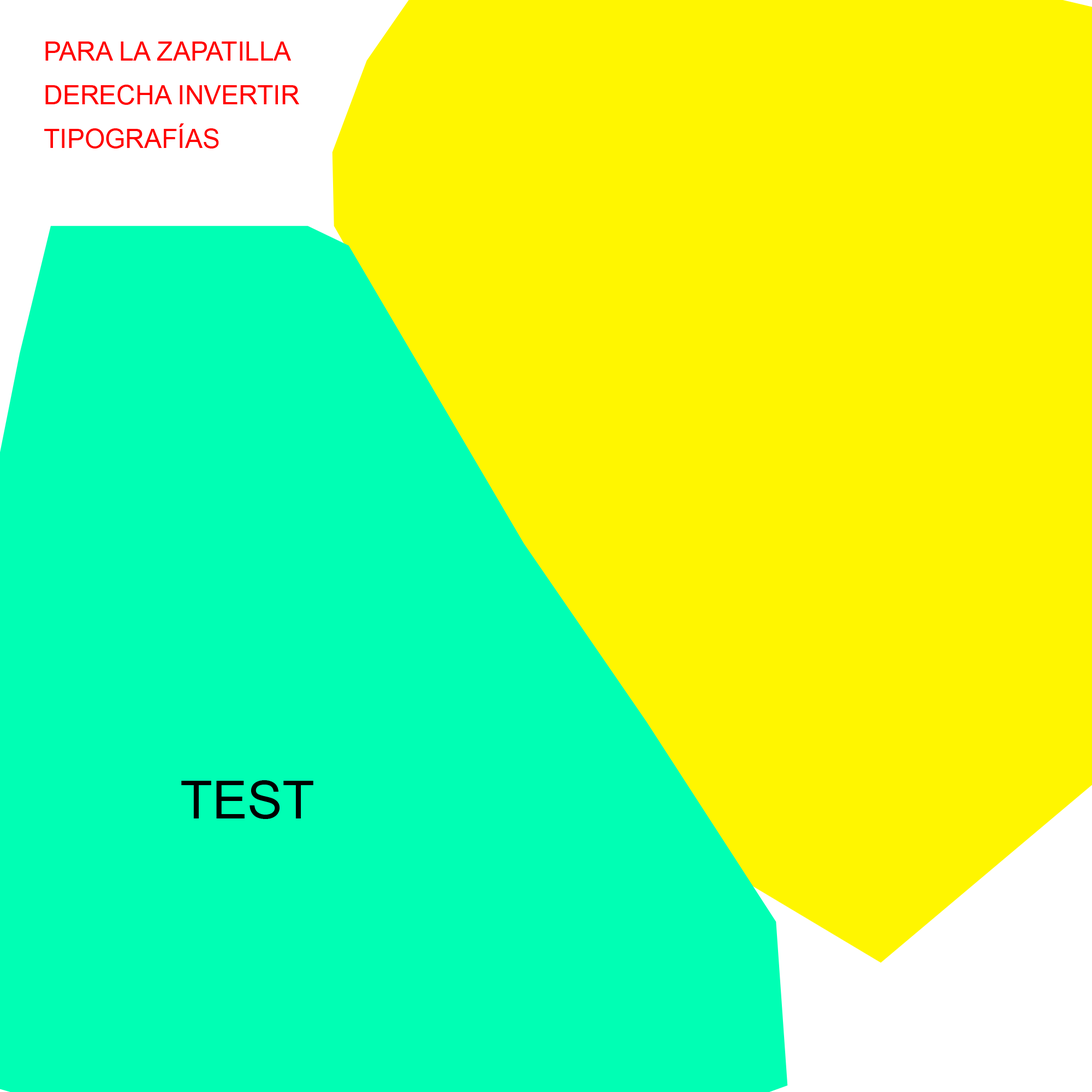
<style>
.page{position:relative;width:1092px;height:1092px;background:#fff600}
.page>*{position:absolute;margin:0}
.t1{font:26.2px/43.8px "ArialMT";color:#ff0000}
.t2{font:52.4px "ArialMT";color:#000000}
</style>
<div class="page">
<p class="t1" style="left:44px;top:41px;width:255px;height:108px">PARA LA ZAPATILLA<br>DERECHA INVERTIR<br>TIPOGRAFÍAS</p>
<p class="t2" style="left:181px;top:780px;width:132px;height:39px">TEST</p>
</div>
